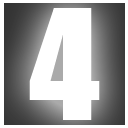
<style>
.page{position:relative;width:128px;height:128px;background:#ffffff}
.page>*{position:absolute;margin:0}
.t1{font:142.1px "Impact";color:#ffffff}
</style>
<div class="page">
<p class="t1" style="left:29px;top:8px;width:71px;height:112px">4</p>
</div>
